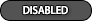
<style>
.page{position:relative;width:92px;height:21px;background:#535353}
.page>*{position:absolute;margin:0}
.t1{font:10px "AdobeHeitiStd-Regular";color:#ffffff}
</style>
<div class="page">
<p class="t1" style="left:23px;top:6px;width:45px;height:9px">DISABLED</p>
</div>
